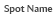
<style>
.page{position:relative;width:56px;height:19px;background:#ffffff}
.page>*{position:absolute;margin:0}
.t1{font:10px "AmiraParadiso";color:#474747}
</style>
<div class="page">
<p class="t1" style="left:4px;top:5px;width:49px;height:9px">Spot Name</p>
</div>
